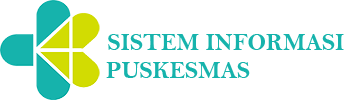
<style>
.page{position:relative;width:350px;height:100px;background:#ffffff}
.page>*{position:absolute;margin:0}
.t1{font:24px "BellMTBold";color:#16b3ac}
</style>
<div class="page">
<p class="t1" style="left:108px;top:34px;width:236px;height:16px">SISTEM INFORMASI</p>
<p class="t1" style="left:106px;top:62px;width:144px;height:16px">PUSKESMAS</p>
</div>
